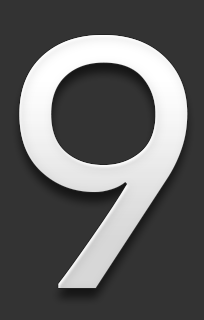
<style>
.page{position:relative;width:204px;height:320px;background:#333333}
.page>*{position:absolute;margin:0}
.t1{font:344.1px "Prelude-Medium";color:#ffffff}
</style>
<div class="page">
<p class="t1" style="left:19px;top:35px;width:169px;height:253px">9</p>
<p class="t1" style="left:19px;top:35px;width:169px;height:253px">9</p>
</div>
